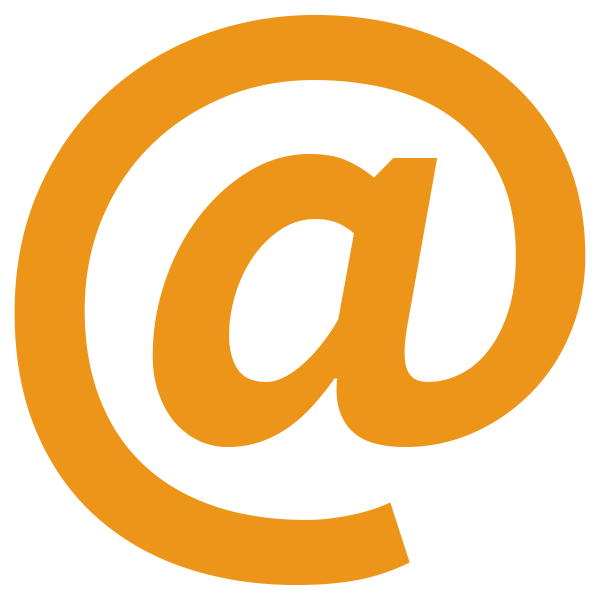
<style>
.page{position:relative;width:600px;height:600px;background:#ffffff}
.page>*{position:absolute;margin:0}
.t1{font:625px "PTSans-Bold";letter-spacing:-0.015em;color:#ec9518}
</style>
<div class="page">
<p class="t1" style="left:14px;top:15px;width:572px;height:570px">@</p>
</div>
